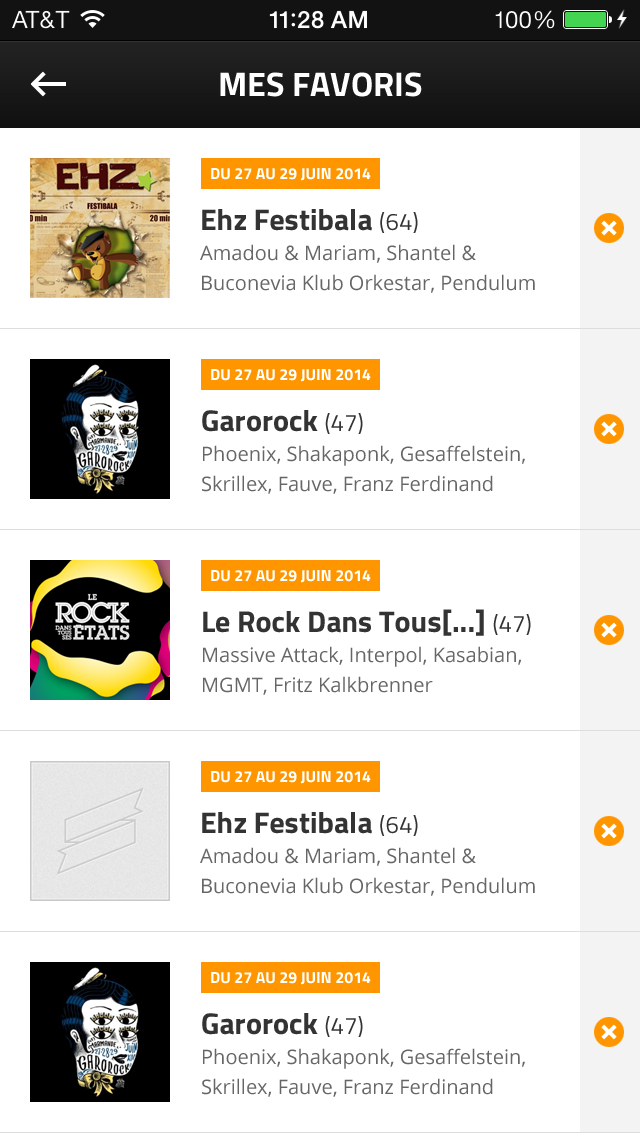
<style>
.page{position:relative;width:640px;height:1136px;background:#ffffff}
.page>*{position:absolute;margin:0}
.t1{font:34px "Titillium-Bold";color:#ffffff;text-transform:uppercase}
.t2{font:16px "Titillium-Bold";color:#ffffff}
.t3{font:20px/30px "OpenSans";color:#666666}
.t4{font:30px/30px "Titillium-Bold";color:#333333}
.t5{font:24px/30px "Titillium-Regular";color:#333333}
</style>
<div class="page">
<p class="t1" style="left:220px;top:72px;width:202px;height:25px">Mes favoris</p>
<p class="t2" style="left:211px;top:168px;width:160px;height:13px">DU 27 AU 29 JUIN 2014</p>
<p class="t3" style="left:200px;top:209px;width:335px;height:84px"><span class="t4">Ehz Festibala </span><span class="t5">(64)<br></span>Amadou &amp; Mariam, Shantel &amp; Buconevia Klub Orkestar, Pendulum Dub Inc</p>
<p class="t2" style="left:211px;top:369px;width:160px;height:13px">DU 27 AU 29 JUIN 2014</p>
<p class="t3" style="left:202px;top:410px;width:323px;height:84px"><span class="t4">Garorock </span><span class="t5">(47)<br></span>Phoenix, Shakaponk, Gesaffelstein, Skrillex, Fauve, Franz Ferdinand</p>
<p class="t2" style="left:211px;top:570px;width:160px;height:13px">DU 27 AU 29 JUIN 2014</p>
<p class="t3" style="left:203px;top:609px;width:328px;height:86px"><span class="t4">Le Rock Dans Tous[...] </span><span class="t5">(47)<br></span>Massive Attack, Interpol, Kasabian, MGMT, Fritz Kalkbrenner</p>
<p class="t2" style="left:211px;top:771px;width:160px;height:13px">DU 27 AU 29 JUIN 2014</p>
<p class="t3" style="left:200px;top:812px;width:335px;height:84px"><span class="t4">Ehz Festibala </span><span class="t5">(64)<br></span>Amadou &amp; Mariam, Shantel &amp; Buconevia Klub Orkestar, Pendulum Dub Inc</p>
<p class="t2" style="left:211px;top:972px;width:160px;height:13px">DU 27 AU 29 JUIN 2014</p>
<p class="t3" style="left:202px;top:1013px;width:323px;height:84px"><span class="t4">Garorock </span><span class="t5">(47)<br></span>Phoenix, Shakaponk, Gesaffelstein, Skrillex, Fauve, Franz Ferdinand</p>
</div>
